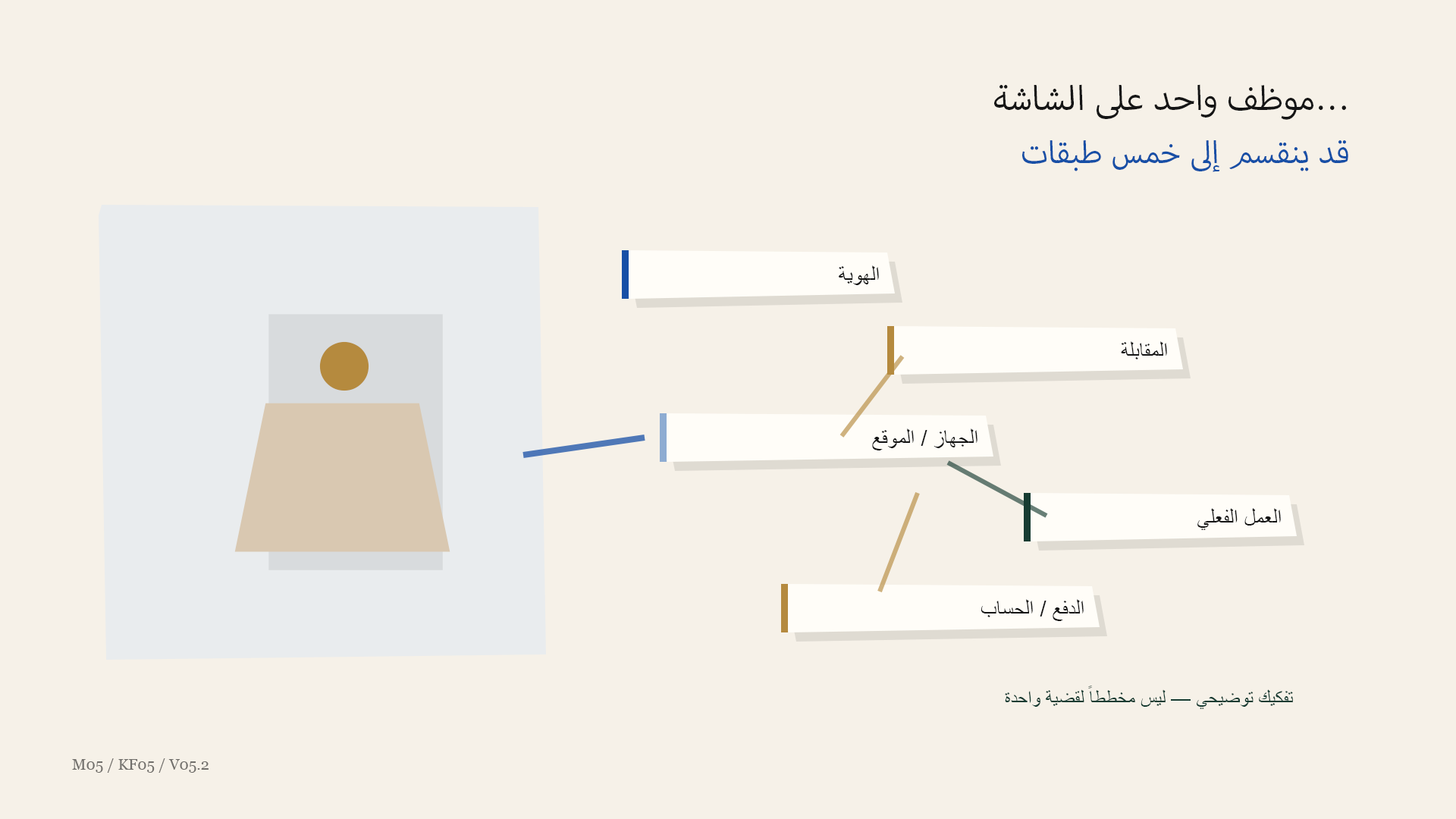
<style>
.page{position:relative;width:1456px;height:819px;background:#f6f1e8}
.page>*{position:absolute;margin:0}
.t1{font:48.5px "MyriadArabic-Regular";color:#151515}
.t2{font:44px "MyriadArabic-Regular";color:#174fa6}
.t3{font:22px "ArialMT";color:#151515}
.t4{font:112.6px "ArialMT";color:#b58a3e}
.t5{font:19.7px "ArialMT";color:#173c32}
.t6{font:15.2px "Georgia";color:#716f6b}
</style>
<div class="page">
<p class="t1" style="left:994px;top:84px;width:352px;height:36px">موظف واحد على الشاشة…</p>
<p class="t2" style="left:1022px;top:140px;width:326px;height:32px">قد ينقسم إلى خمس طبقات</p>
<p class="t3" style="left:838px;top:265px;width:41px;height:20px">الهوية</p>
<p class="t4" style="left:319px;top:341px;width:50px;height:50px">●</p>
<p class="t3" style="left:1121px;top:341px;width:46px;height:18px">المقابلة</p>
<p class="t3" style="left:872px;top:428px;width:105px;height:22px">الجهاز / الموقع</p>
<p class="t3" style="left:1197px;top:508px;width:84px;height:22px">العمل الفعلي</p>
<p class="t3" style="left:981px;top:599px;width:103px;height:22px">الدفع / الحساب</p>
<p class="t5" style="left:1005px;top:686px;width:288px;height:23px">تفكيك توضيحي — ليس مخططاً لقضية واحدة</p>
<p class="t6" style="left:72px;top:758px;width:137px;height:15px">M05 / KF05 / V05.2</p>
</div>
